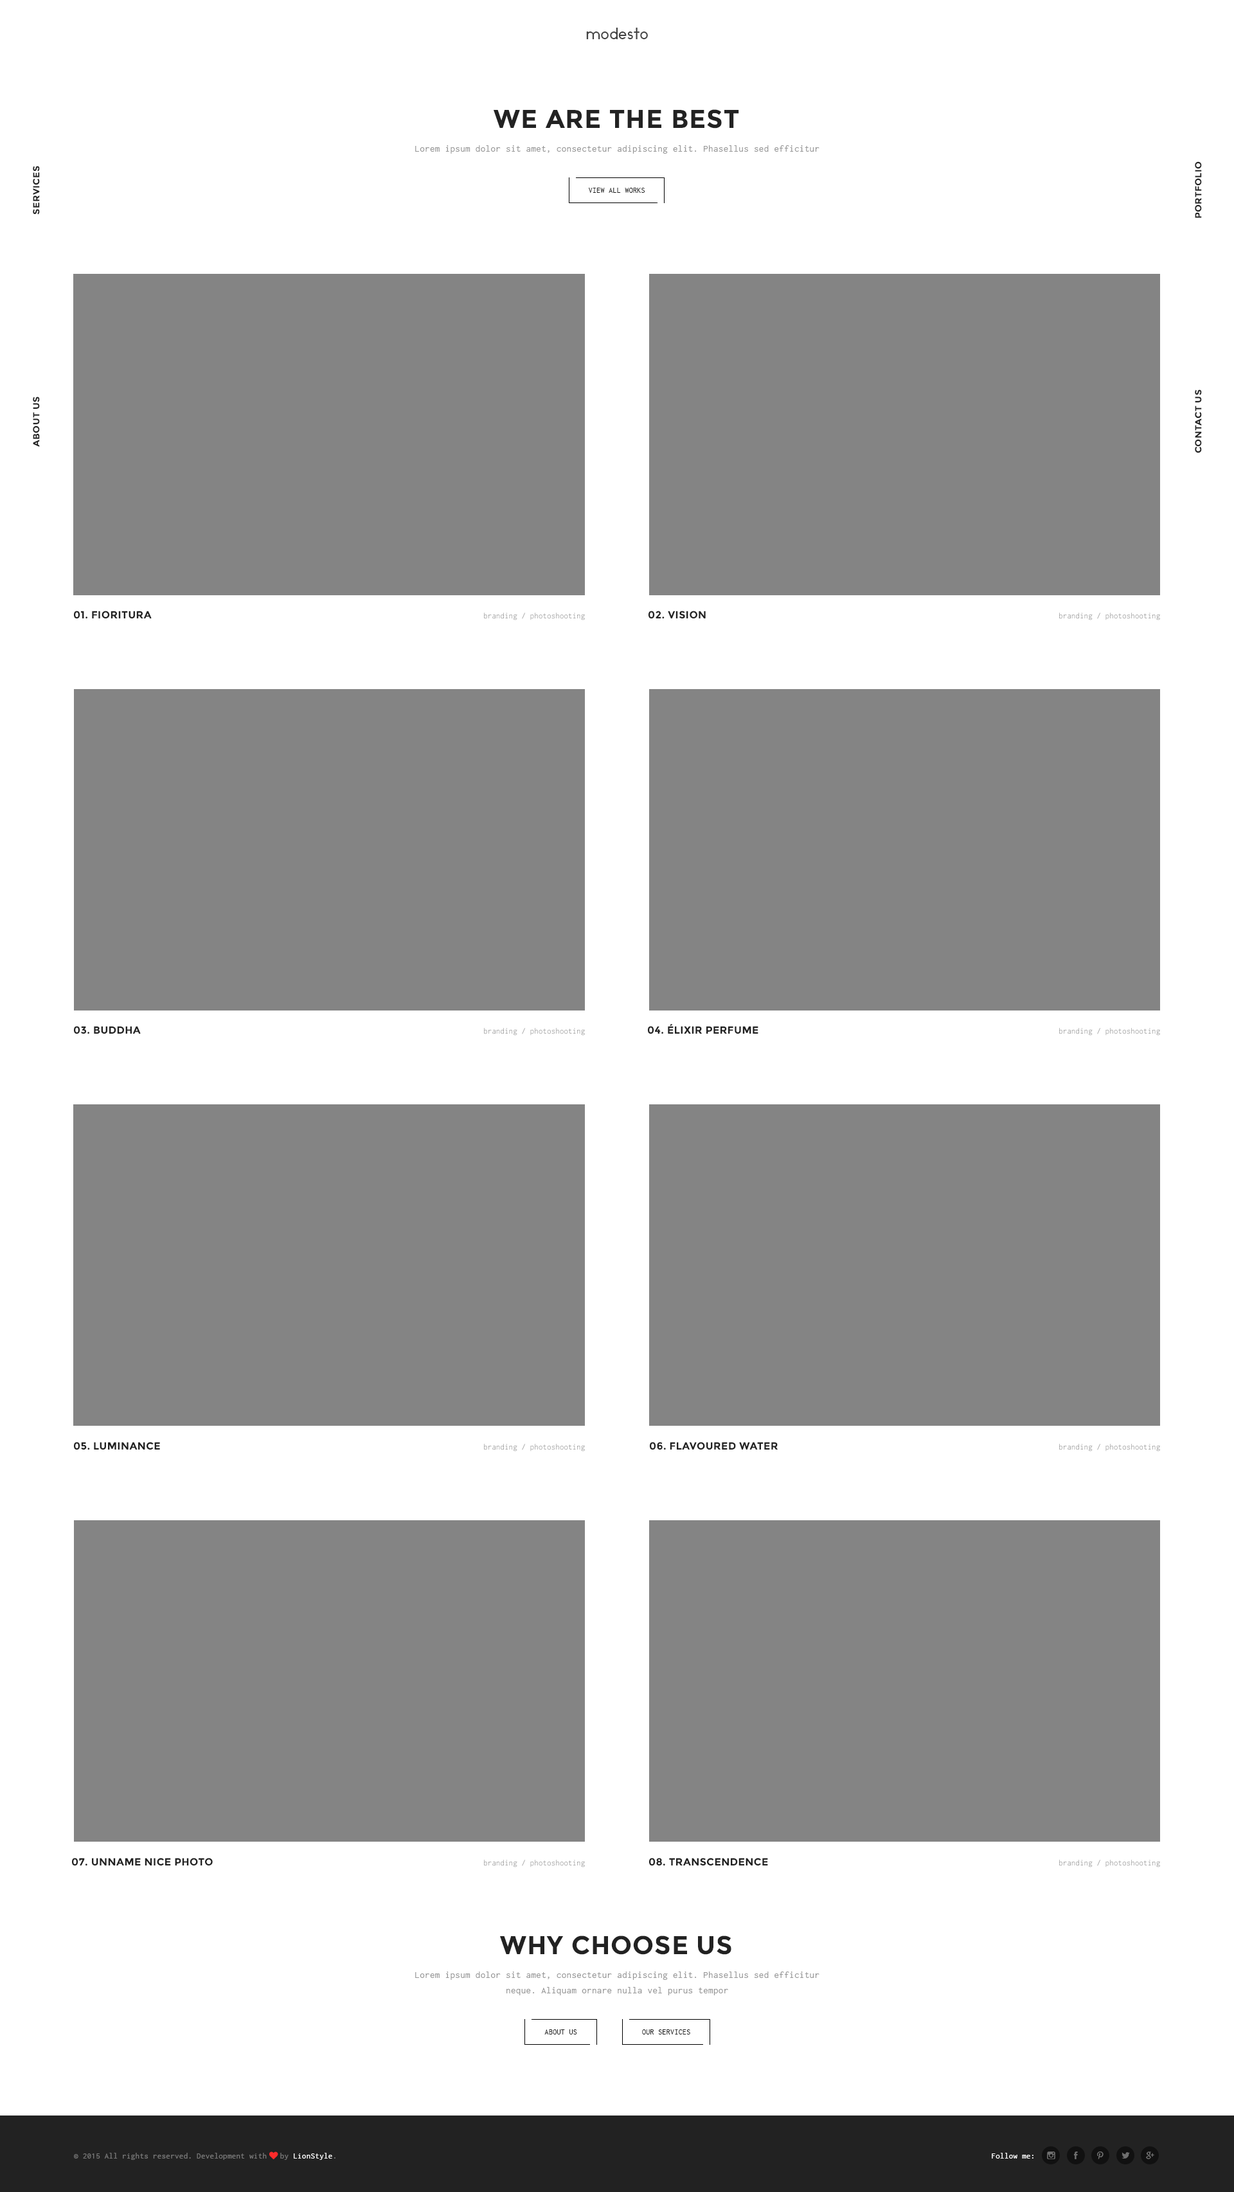
<style>
.page{position:relative;width:1234px;height:2192px;background:#848484}
.page>*{position:absolute;margin:0}
.t1{font:15.4px "Ikaros";letter-spacing:0.025em;color:#444444}
.t2{font:25.7px "Montserrat-Bold";letter-spacing:0.025em;color:#222222;text-transform:uppercase}
.t3{font:9.6px "Inconsolata";letter-spacing:0.025em;color:#989898}
.t4{font:9px "Montserrat-Bold";letter-spacing:0.025em;color:#222222;text-transform:uppercase;scale:1.03 1}
.t5{font:7.7px "Inconsolata";letter-spacing:0.025em;color:#222222;text-transform:uppercase}
.t6{font:10.3px "Montserrat-Bold";letter-spacing:0.025em;color:#222222;text-transform:uppercase}
.t7{font:8.4px "Inconsolata";letter-spacing:0.025em;color:#989898;scale:0.97 1}
.t8{font:9.6px/15.4px "Inconsolata";letter-spacing:0.025em;color:#989898}
.t9{font:8.4px "Inconsolata";letter-spacing:0.025em;color:#777777}
.t10{font:8.4px "FontAwesome";letter-spacing:0.025em;color:#fe2b2b}
.t11{font:8.4px "Inconsolata";letter-spacing:0.025em;color:#ffffff}
.t12{font:8.4px "Inconsolata";letter-spacing:0.025em;color:#fefefe}
</style>
<div class="page">
<p class="t1" style="left:586px;top:28px;width:62px;height:11px">modesto</p>
<p class="t2" style="left:494px;top:109px;width:245px;height:20px">we are the best</p>
<p class="t3" style="left:415px;top:145px;width:405px;height:9px">Lorem ipsum dolor sit amet, consectetur adipiscing elit. Phasellus sed efficitur</p>
<p class="t4" style="left:1195px;top:161px;width:7px;height:57px;rotate:-90deg">portfolio</p>
<p class="t4" style="left:33px;top:166px;width:7px;height:49px;rotate:-90deg">services</p>
<p class="t5" style="left:588px;top:188px;width:57px;height:5px">view all works</p>
<p class="t4" style="left:1195px;top:390px;width:7px;height:63px;rotate:-90deg">contact us</p>
<p class="t4" style="left:33px;top:397px;width:7px;height:50px;rotate:-90deg">about us</p>
<p class="t6" style="left:74px;top:611px;width:78px;height:8px">01. Fioritura</p>
<p class="t7" style="left:484px;top:613px;width:101px;height:7px">branding / photoshooting</p>
<p class="t6" style="left:649px;top:611px;width:57px;height:8px">02. Vision</p>
<p class="t7" style="left:1059px;top:613px;width:101px;height:7px">branding / photoshooting</p>
<p class="t6" style="left:648px;top:1023px;width:111px;height:11px">04. Élixir Perfume</p>
<p class="t6" style="left:74px;top:1026px;width:67px;height:8px">03. Buddha</p>
<p class="t7" style="left:484px;top:1028px;width:101px;height:8px">branding / photoshooting</p>
<p class="t7" style="left:1059px;top:1028px;width:101px;height:8px">branding / photoshooting</p>
<p class="t6" style="left:74px;top:1442px;width:86px;height:8px">05. Luminance</p>
<p class="t7" style="left:484px;top:1444px;width:101px;height:8px">branding / photoshooting</p>
<p class="t6" style="left:650px;top:1442px;width:129px;height:8px">06. Flavoured water</p>
<p class="t7" style="left:1059px;top:1444px;width:101px;height:8px">branding / photoshooting</p>
<p class="t6" style="left:72px;top:1858px;width:141px;height:8px">07. unname nice photo</p>
<p class="t7" style="left:484px;top:1860px;width:101px;height:8px">branding / photoshooting</p>
<p class="t6" style="left:649px;top:1858px;width:119px;height:8px">08. Transcendence</p>
<p class="t7" style="left:1059px;top:1860px;width:101px;height:8px">branding / photoshooting</p>
<p class="t2" style="left:500px;top:1936px;width:232px;height:19px">why choose us</p>
<p class="t8" style="left:415px;top:1972px;width:405px;height:23px;text-align:center">Lorem ipsum dolor sit amet, consectetur adipiscing elit. Phasellus sed efficitur neque. Aliquam ornare nulla vel purus tempor</p>
<p class="t5" style="left:545px;top:2030px;width:32px;height:5px">about us</p>
<p class="t5" style="left:642px;top:2030px;width:48px;height:5px">our services</p>
<p class="t9" style="left:74px;top:2152px;width:262px;height:8px">© 2015 All rights reserved. Development with <span class="t10">♥ </span>by <span class="t11">LionStyle</span>.</p>
<p class="t12" style="left:992px;top:2153px;width:42px;height:6px">Follow me:</p>
</div>
